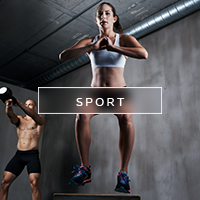
<style>
.page{position:relative;width:200px;height:200px}
.page>*{position:absolute;margin:0}
.t1{font:11.9px "IstokWeb-Regular";letter-spacing:0.2em;color:#ffffff;text-transform:uppercase}
</style>
<div class="page">
<p class="t1" style="left:76px;top:98px;width:49px;height:8px">SPORT</p>
</div>
